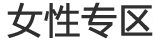
<style>
.page{position:relative;width:155px;height:40px;background:#ffffff}
.page>*{position:absolute;margin:0}
.t1{font:36px "MicrosoftYaHei";color:#2f2f2f;font-weight:bold}
</style>
<div class="page">
<p class="t1" style="left:7px;top:2px;width:146px;height:37px">女性专区</p>
</div>
